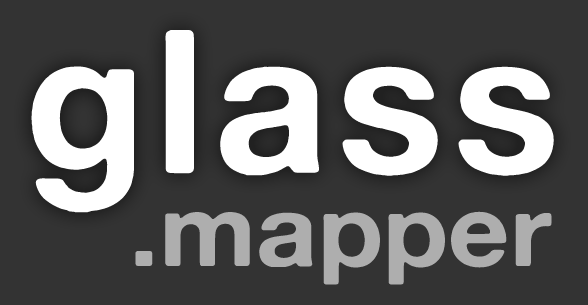
<style>
.page{position:relative;width:588px;height:305px;background:#333333}
.page>*{position:absolute;margin:0}
.t1{font:200px "AlteHaasGrotesk_Bold";letter-spacing:0.04em;color:#ffffff}
.t2{font:101.1px "AlteHaasGrotesk_Bold";color:#aeaeae;scale:1.06 1}
</style>
<div class="page">
<p class="t1" style="left:31px;top:30px;width:523px;height:183px">glass</p>
<p class="t2" style="left:135px;top:211px;width:417px;height:74px">.mapper</p>
</div>
